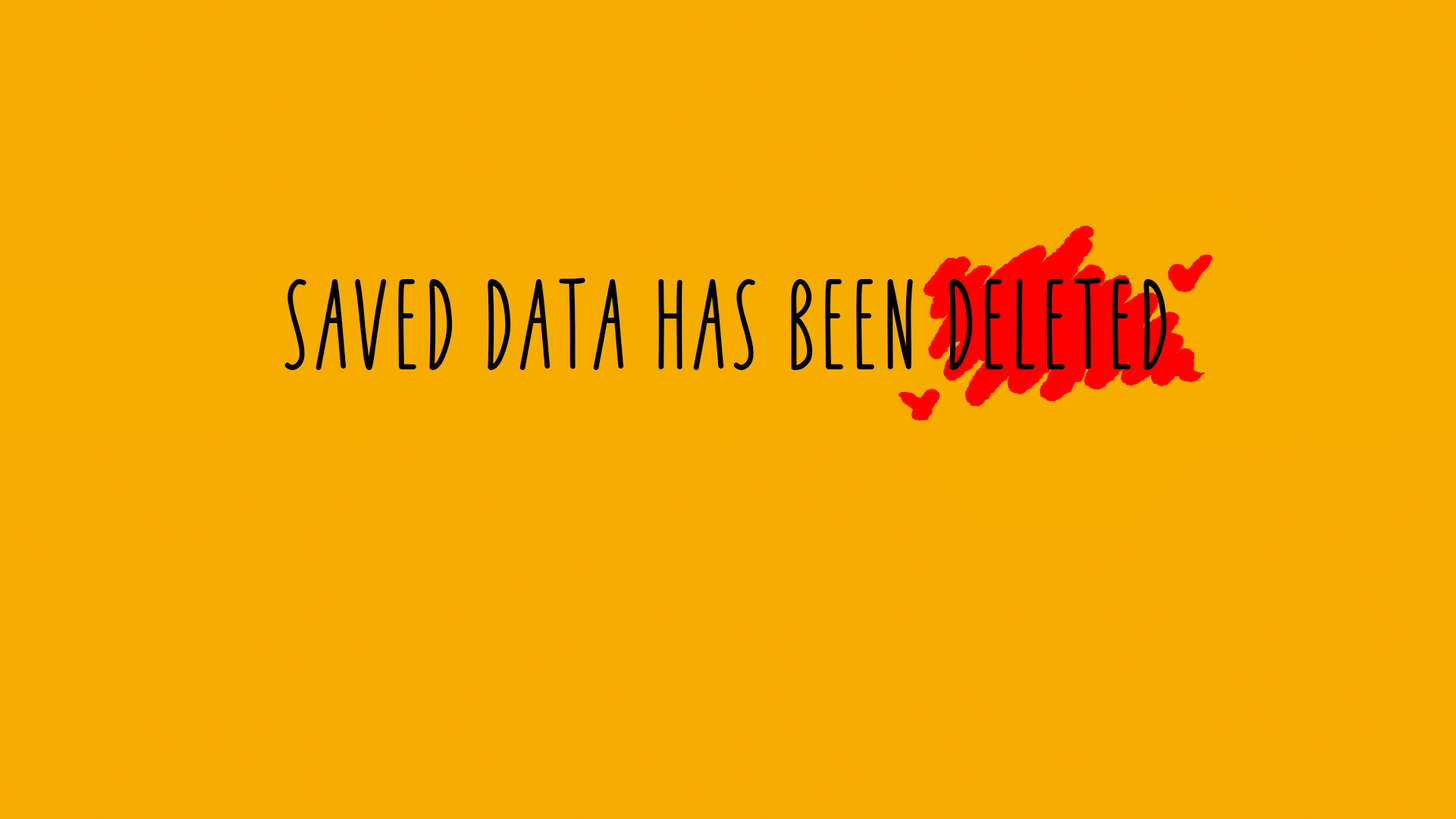
<style>
.page{position:relative;width:1456px;height:819px;background:#f7ac00}
.page>*{position:absolute;margin:0}
.t1{font:118.4px "KEYLIMEDemo-Regular";letter-spacing:0.04em;color:#000000;font-variant:small-caps}
</style>
<div class="page">
<p class="t1" style="left:284px;top:278px;width:883px;height:92px">SAVED DATA HAS BEEN DELETED</p>
</div>
